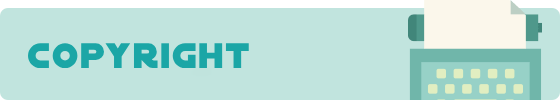
<style>
.page{position:relative;width:560px;height:100px;background:#c1e4de}
.page>*{position:absolute;margin:0}
.t1{font:38px "DistantGalaxy";letter-spacing:0.05em;color:#1ba6a6}
</style>
<div class="page">
<p class="t1" style="left:28px;top:43px;width:221px;height:25px">Copyright</p>
</div>
